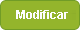
<style>
.page{position:relative;width:80px;height:30px;background:#94b52c}
.page>*{position:absolute;margin:0}
.t1{font:12px "Arial-BoldMT";color:#fefefe}
</style>
<div class="page">
<p class="t1" style="left:16px;top:10px;width:52px;height:9px">Modificar</p>
</div>
